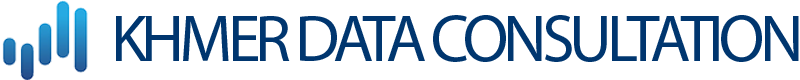
<style>
.page{position:relative;width:800px;height:80px;background:#ffffff}
.page>*{position:absolute;margin:0}
.t1{font:66.1px "MyriadPro-Regular";letter-spacing:-0.075em;color:#00366f;text-transform:uppercase}
</style>
<div class="page">
<p class="t1" style="left:116px;top:15px;width:683px;height:47px">khmer data consultation</p>
</div>
